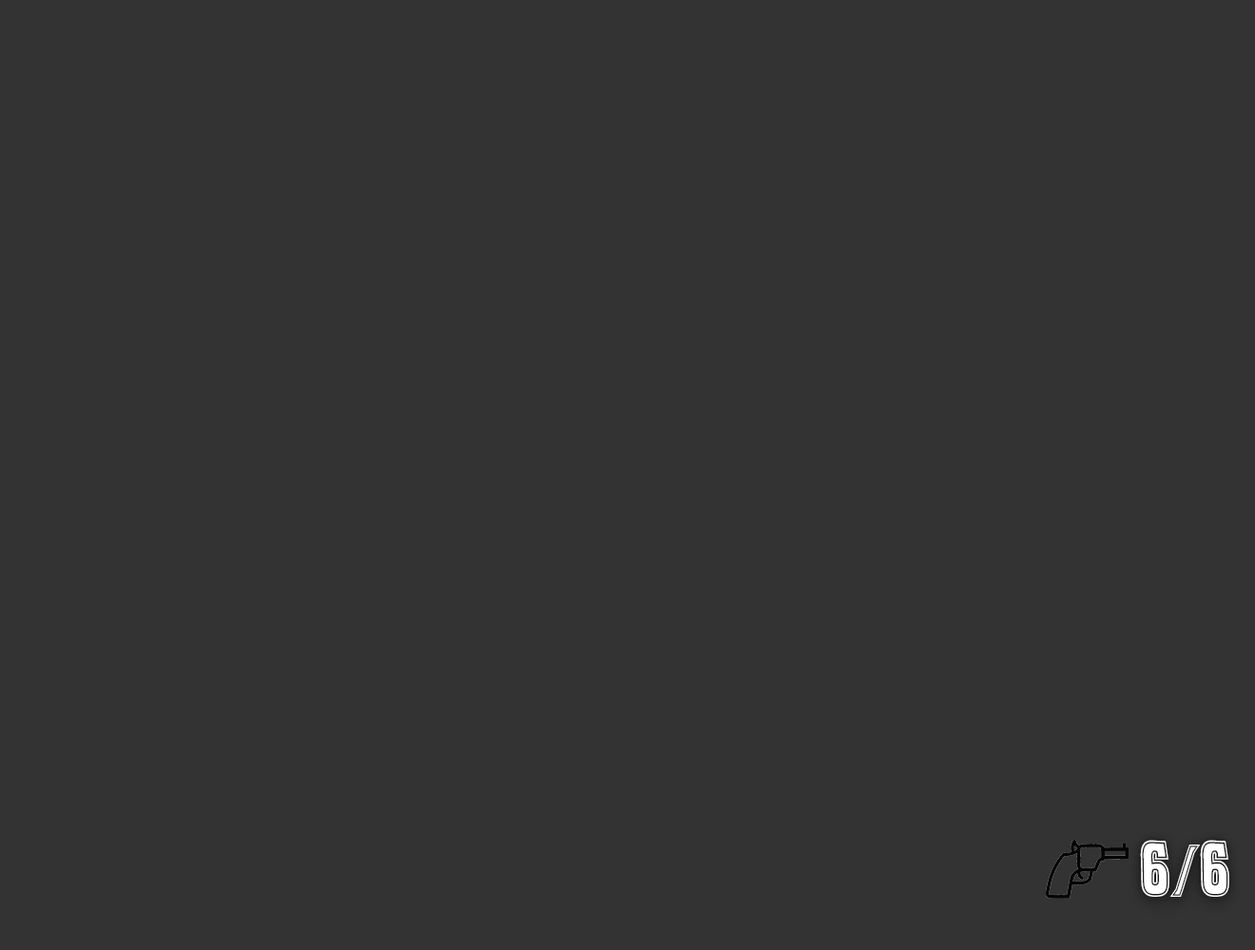
<style>
.page{position:relative;width:1255px;height:950px;background:#333333}
.page>*{position:absolute;margin:0}
.t1{font:72.1px "WhiskeyTown-Drunk";color:#ffffff;scale:0.92 1}
</style>
<div class="page">
<p class="t1" style="left:1140px;top:840px;width:89px;height:57px">6/6</p>
</div>
